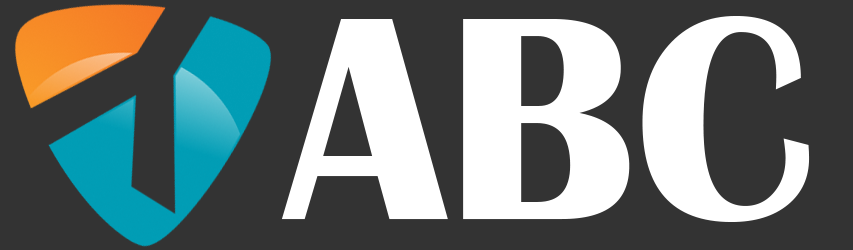
<style>
.page{position:relative;width:853px;height:250px;background:#333333}
.page>*{position:absolute;margin:0}
.t1{font:300px "BritannicBold";color:#ffffff}
</style>
<div class="page">
<p class="t1" style="left:281px;top:16px;width:529px;height:206px">ABC</p>
</div>
